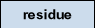
<style>
.page{position:relative;width:95px;height:28px;background:#ccdcec}
.page>*{position:absolute;margin:0}
.t1{font:13.9px "Arial-BoldMT";color:#000000}
</style>
<div class="page">
<p class="t1" style="left:23px;top:9px;width:49px;height:11px">residue</p>
</div>
